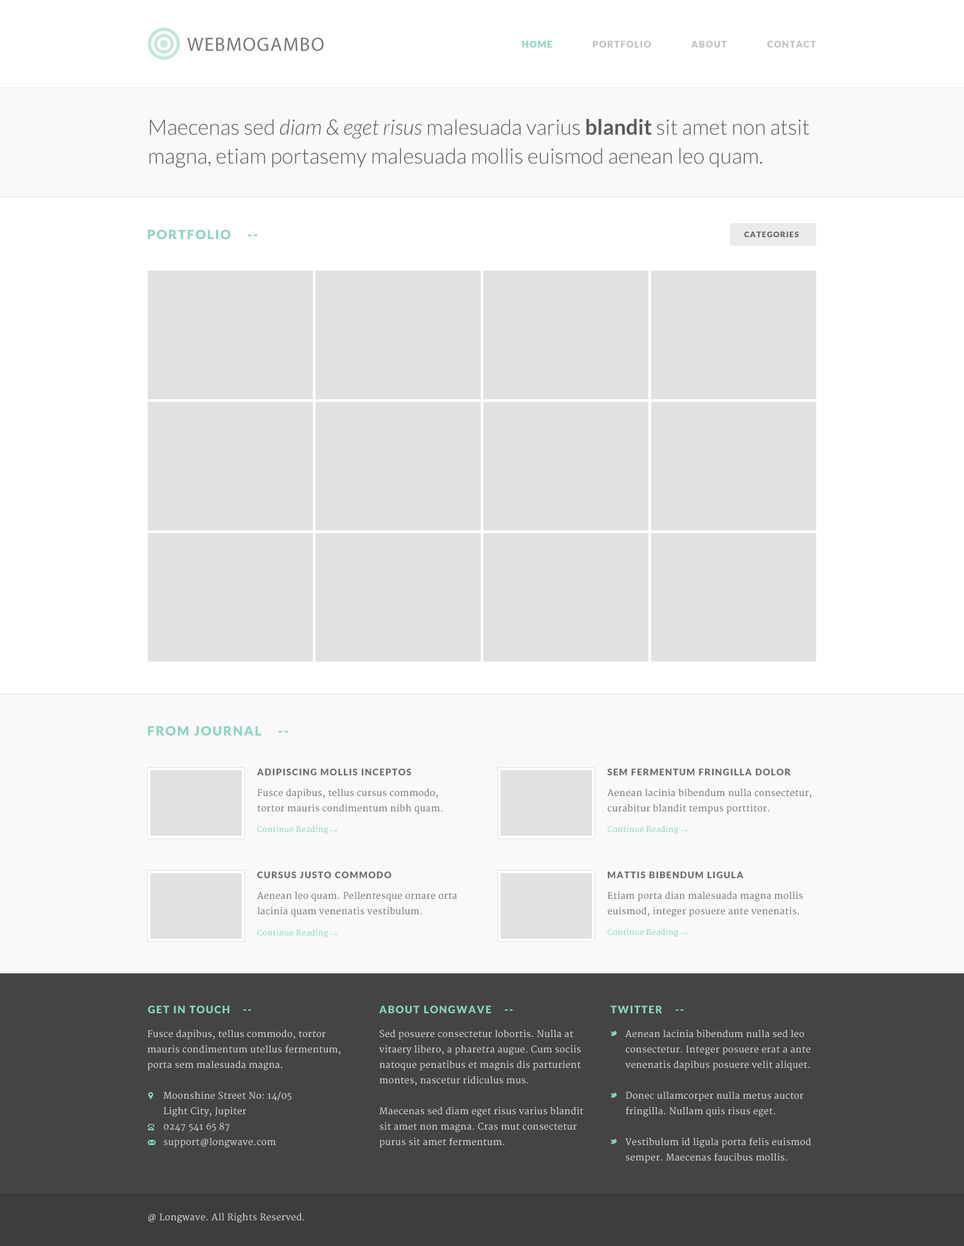
<style>
.page{position:relative;width:964px;height:1246px;background:#ffffff}
.page>*{position:absolute;margin:0}
.t1{font:19.3px "MyriadPro-Regular";letter-spacing:0.05em;color:#7a7a7a;text-transform:uppercase}
.t2{font:9px "Lato-Black";letter-spacing:0.1em;color:#c0c0c0;text-transform:uppercase}
.t3{font:9px "Lato-Black";letter-spacing:0.1em;color:#88d5c2;text-transform:uppercase}
.t4{font:21.2px/28.9px "Lato-Light";color:#5a5a5a}
.t5{font:21.2px/28.9px "Lato-LightItalic";color:#5a5a5a}
.t6{font:21.2px/28.9px "Lato-Bold";color:#5a5a5a}
.t7{font:12.9px "Lato-Black";letter-spacing:0.1em;color:#88d5c2;text-transform:uppercase}
.t8{font:7.7px "Lato-Black";letter-spacing:0.1em;color:#616161;text-transform:uppercase}
.t9{font:9px "Lato-Black";letter-spacing:0.1em;color:#707070;text-transform:uppercase}
.t10{font:9px/15.4px "Merriweather";letter-spacing:0.02em;color:#797979}
.t11{font:7.7px "Merriweather";letter-spacing:0.02em;color:#88d5c2}
.t12{font:7.7px "ArialMT";letter-spacing:0.02em;color:#88d5c2}
.t13{font:10.3px "Lato-Black";letter-spacing:0.1em;color:#88d5c2;text-transform:uppercase}
.t14{font:9px/15.4px "Merriweather";letter-spacing:0.02em;color:#d9d9d9}
.t15{font:9px "Merriweather";letter-spacing:0.02em;color:#d9d9d9}
</style>
<div class="page">
<p class="t1" style="left:187px;top:37px;width:137px;height:14px">webMogambo</p>
<p class="t2" style="left:522px;top:40px;width:294px;height:8px"><span class="t3">Home               </span>Portfolio               about               contact</p>
<p class="t4" style="left:149px;top:119px;width:660px;height:49px">Maecenas sed <span class="t5">diam &amp; eget risus </span>malesuada varius <span class="t6">blandit</span> sit amet non atsit magna, etiam portasemy malesuada mollis euismod aenean leo quam.</p>
<p class="t7" style="left:148px;top:230px;width:110px;height:9px">Portfolio    --</p>
<p class="t8" style="left:744px;top:231px;width:55px;height:6px">Categories</p>
<p class="t7" style="left:148px;top:726px;width:140px;height:9px">From journal    --</p>
<p class="t9" style="left:257px;top:768px;width:154px;height:7px">Adipiscing Mollis Inceptos</p>
<p class="t9" style="left:608px;top:768px;width:183px;height:7px">Sem Fermentum Fringilla Dolor</p>
<p class="t10" style="left:257px;top:788px;width:186px;height:26px">Fusce dapibus, tellus cursus commodo, tortor mauris condimentum nibh quam.</p>
<p class="t10" style="left:608px;top:788px;width:204px;height:26px">Aenean lacinia bibendum nulla consectetur, curabitur blandit tempus porttitor.</p>
<p class="t11" style="left:257px;top:825px;width:81px;height:9px">Continue Reading <span class="t12">→</span></p>
<p class="t11" style="left:608px;top:825px;width:80px;height:9px">Continue Reading <span class="t12">→</span></p>
<p class="t9" style="left:257px;top:871px;width:135px;height:7px">Cursus Justo Commodo</p>
<p class="t9" style="left:608px;top:871px;width:136px;height:7px">Mattis Bibendum Ligula</p>
<p class="t10" style="left:257px;top:892px;width:200px;height:25px">Aenean leo quam. Pellentesque ornare orta lacinia quam venenatis vestibulum.</p>
<p class="t10" style="left:608px;top:891px;width:195px;height:26px">Etiam porta dian malesuada magna mollis euismod, integer posuere ante venenatis.</p>
<p class="t11" style="left:257px;top:929px;width:81px;height:8px">Continue Reading <span class="t12">→</span></p>
<p class="t11" style="left:608px;top:928px;width:80px;height:9px">Continue Reading <span class="t12">→</span></p>
<p class="t13" style="left:148px;top:1005px;width:103px;height:8px">Get ın touch    --</p>
<p class="t13" style="left:379px;top:1005px;width:134px;height:8px">About longwave    --</p>
<p class="t13" style="left:611px;top:1005px;width:73px;height:8px">twitter    --</p>
<p class="t14" style="left:147px;top:1029px;width:194px;height:41px">Fusce dapibus, tellus commodo, tortor mauris condimentum utellus fermentum, porta sem malesuada magna.</p>
<p class="t14" style="left:379px;top:1029px;width:205px;height:119px">Sed posuere consectetur lobortis. Nulla at vitaery libero, a pharetra augue. Cum sociis natoque penatibus et magnis dis parturient montes, nascetur ridiculus mus. <br><br>Maecenas sed diam eget risus varius blandit sit amet non magna. Cras mut consectetur purus sit amet fermentum.</p>
<p class="t14" style="left:626px;top:1029px;width:185px;height:134px">Aenean lacinia bibendum nulla sed leo consectetur. Integer posuere erat a ante venenatis dapibus posuere velit aliquet.<br><br>Donec ullamcorper nulla metus auctor fringilla. Nullam quis risus eget.<br><br>Vestibulum id ligula porta felis euismod semper. Maecenas faucibus mollis.</p>
<p class="t14" style="left:163px;top:1091px;width:129px;height:57px">Moonshine Street No: 14/05 <br>Light City, Jupiter<br>0247 541 65 87<br>support@longwave.com</p>
<p class="t15" style="left:148px;top:1212px;width:156px;height:11px">@ Longwave. All Rights Reserved.</p>
</div>
